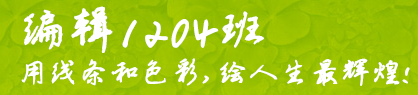
<style>
.page{position:relative;width:418px;height:95px}
.page>*{position:absolute;margin:0}
.t1{font:48px "HAKUYOGuiFanZi3500";color:#ffffff;font-weight:bold}
.t2{font:30px "HAKUYOGuiFanZi3500";color:#ffffff;font-weight:bold}
</style>
<div class="page">
<p class="t1" style="left:24px;top:6px;width:240px;height:47px">编辑1204班</p>
<p class="t2" style="left:21px;top:58px;width:389px;height:28px">用线条和色彩,绘人生最辉煌!</p>
</div>
